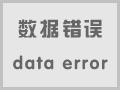
<style>
.page{position:relative;width:120px;height:90px;background:#e6e6e6}
.page>*{position:absolute;margin:0}
.t1{font:20px "FZZYJW--GB1-0";letter-spacing:0.1em;color:#666666}
.t2{font:18px "FZYHJW--GB1-0";letter-spacing:0.1em;color:#666666}
</style>
<div class="page">
<p class="t1" style="left:18px;top:19px;width:84px;height:19px">数据错误</p>
<p class="t2" style="left:13px;top:55px;width:95px;height:15px">data error</p>
</div>
